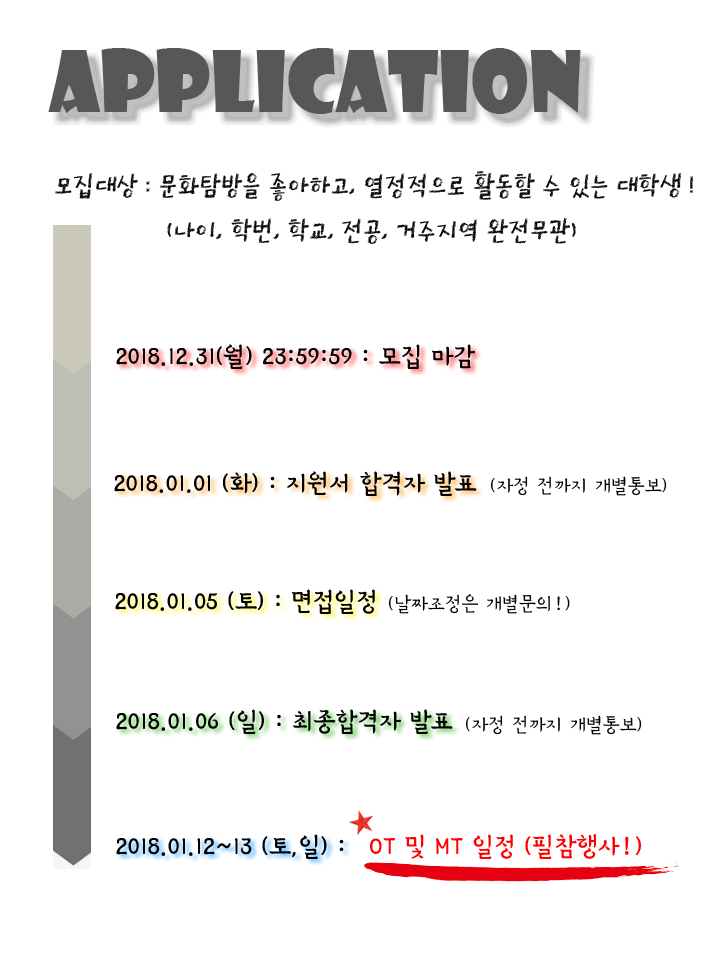
<style>
.page{position:relative;width:720px;height:960px;background:#ffffff}
.page>*{position:absolute;margin:0}
.t1{font:83.3px "ShowcardGothic-Reg";color:#575757}
.t2{font:30px "Pix_HUCreA";color:#000000}
.t3{font:30px "Pix_HULeaf152";color:#000000}
.t4{font:23.3px "Pix_HULeaf132";color:#000000}
.t5{font:30px "Pix_HULeaf152";color:#ff0000}
</style>
<div class="page">
<p class="t1" style="left:48px;top:48px;width:533px;height:66px">Application</p>
<p class="t2" style="left:55px;top:171px;width:638px;height:30px">모집대상 : 문화탐방을 좋아하고, 열정적으로 활동할 수 있는 대학생 !</p>
<p class="t2" style="left:167px;top:217px;width:409px;height:27px">(나이, 학번, 학교, 전공, 거주지역 완전무관)</p>
<p class="t3" style="left:116px;top:344px;width:359px;height:25px">2018.12.31(월) 23:59:59 : 모집 마감</p>
<p class="t3" style="left:114px;top:471px;width:363px;height:25px">2018.01.01 (화) : 지원서 합격자 발표</p>
<p class="t4" style="left:490px;top:476px;width:177px;height:20px">(자정 전까지 개별통보)</p>
<p class="t3" style="left:115px;top:589px;width:260px;height:25px">2018.01.05 (토) : 면접일정</p>
<p class="t4" style="left:388px;top:594px;width:182px;height:20px">(날짜조정은 개별문의!)</p>
<p class="t3" style="left:116px;top:709px;width:337px;height:25px">2018.01.06 (일) : 최종합격자 발표</p>
<p class="t4" style="left:465px;top:715px;width:177px;height:20px">(자정 전까지 개별통보)</p>
<p class="t3" style="left:116px;top:834px;width:228px;height:25px">2018.01.12~13 (토,일) :</p>
<p class="t5" style="left:370px;top:834px;width:271px;height:25px">OT 및 MT 일정 (필참행사!)</p>
</div>
